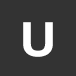
<style>
.page{position:relative;width:76px;height:76px;background:#333333}
.page>*{position:absolute;margin:0}
.t1{font:47.5px "OpenSans-Bold";color:#ffffff;scale:1.06 1}
</style>
<div class="page">
<p class="t1" style="left:23px;top:22px;width:30px;height:35px">U</p>
</div>
